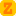
<style>
.page{position:relative;width:16px;height:16px;background:#ffc600}
.page>*{position:absolute;margin:0}
.t1{font:18px "CourierNewPS-BoldMT";letter-spacing:0.01em;color:#ff7e00;text-transform:uppercase;font-weight:bold}
</style>
<div class="page">
<p class="t1" style="left:3px;top:2px;width:10px;height:12px">Z</p>
</div>
